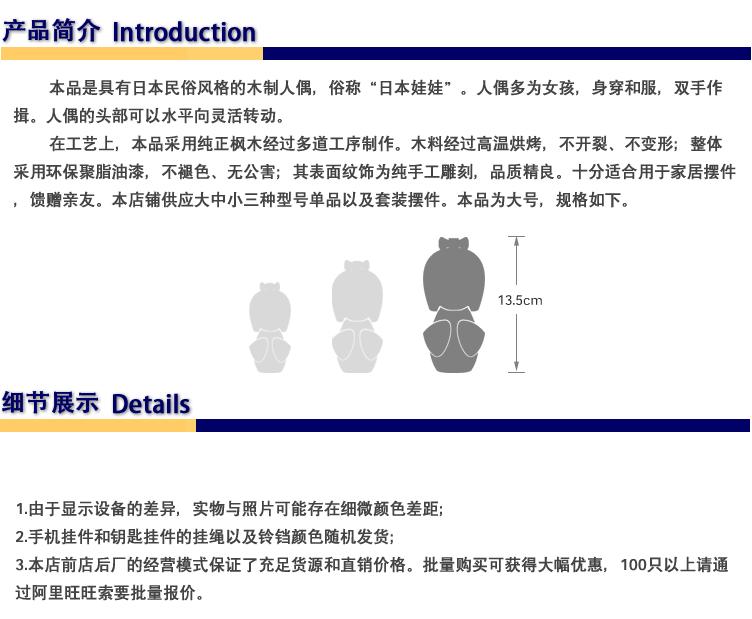
<style>
.page{position:relative;width:752px;height:619px;background:#ffffff}
.page>*{position:absolute;margin:0}
.t1{font:24px "AdobeHeitiStd-Regular";color:#000066;font-weight:bold}
.t2{font:16px "SIL-Hei-Med-Jian";color:#434343;font-weight:bold}
.t3{font:14.1px "SIL-Hei-Med-Jian";color:#333333}
</style>
<div class="page">
<p class="t1" style="left:2px;top:18px;width:99px;height:24px">产品简介</p>
<p class="t1" style="left:114px;top:21px;width:141px;height:21px">Introduction</p>
<p class="t2" style="left:13px;top:79px;width:723px;height:129px">本品是具有日本民俗风格的木制人偶，俗称“日本娃娃”。人偶多为女孩，身穿和服，双手作揖。人偶的头部可以水平向灵活转动。<br> 在工艺上，本品采用纯正枫木经过多道工序制作。木料经过高温烘烤，不开裂、不变形；整体采用环保聚脂油漆，不褪色、无公害；其表面纹饰为纯手工雕刻，品质精良。十分适合用于家居摆件，馈赠亲友。本店铺供应大中小三种型号单品以及套装摆件。本品为大号，规格如下。</p>
<p class="t3" style="left:498px;top:295px;width:44px;height:10px">13.5cm</p>
<p class="t1" style="left:2px;top:391px;width:97px;height:23px">细节展示</p>
<p class="t1" style="left:113px;top:393px;width:77px;height:21px">Details</p>
<p class="t2" style="left:15px;top:500px;width:713px;height:101px">1.由于显示设备的差异，实物与照片可能存在细微颜色差距；<br>2.手机挂件和钥匙挂件的挂绳以及铃铛颜色随机发货；<br>3.本店前店后厂的经营模式保证了充足货源和直销价格。批量购买可获得大幅优惠，100只以上请通过阿里旺旺索要批量报价。</p>
</div>
